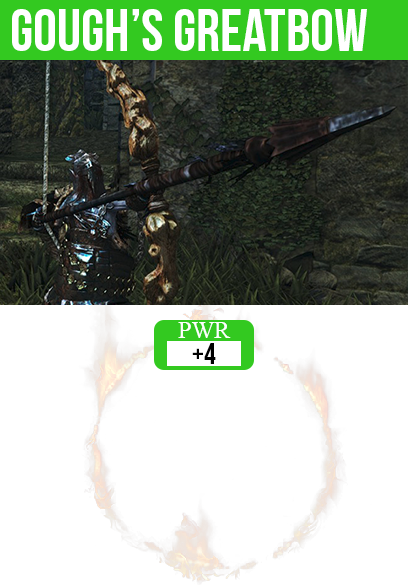
<style>
.page{position:relative;width:408px;height:585px;background:#ffffff}
.page>*{position:absolute;margin:0}
.t1{font:60px "BebasNeue";color:#ffffff}
.t2{font:24px "TimesNewRomanPSMT";color:#ffffff}
.t3{font:30px "BebasNeue";color:#000000}
</style>
<div class="page">
<p class="t1" style="left:12px;top:9px;width:355px;height:42px">gough’s greatbow</p>
<p class="t2" style="left:178px;top:322px;width:53px;height:16px">PWR</p>
<p class="t3" style="left:192px;top:343px;width:24px;height:21px">+4</p>
</div>
